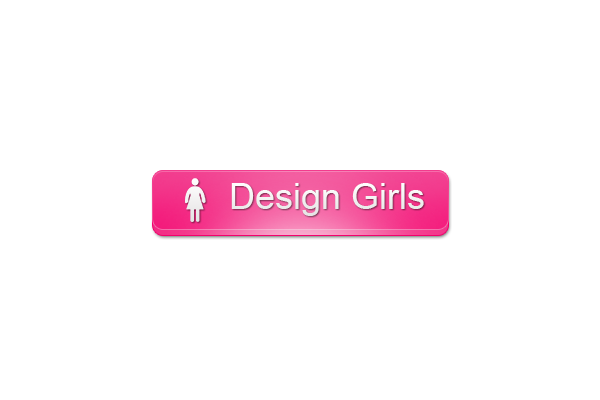
<style>
.page{position:relative;width:600px;height:400px;background:#ffffff}
.page>*{position:absolute;margin:0}
.t1{font:36px "ArialMT";color:#fdfafb}
</style>
<div class="page">
<p class="t1" style="left:231px;top:183px;width:193px;height:33px">Design Girls</p>
</div>
